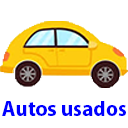
<style>
.page{position:relative;width:128px;height:128px;background:#ffffff}
.page>*{position:absolute;margin:0}
.t1{font:21px "MyriadPro-Bold";color:#0000ff}
</style>
<div class="page">
<p class="t1" style="left:2px;top:101px;width:124px;height:15px">Autos usados</p>
</div>
